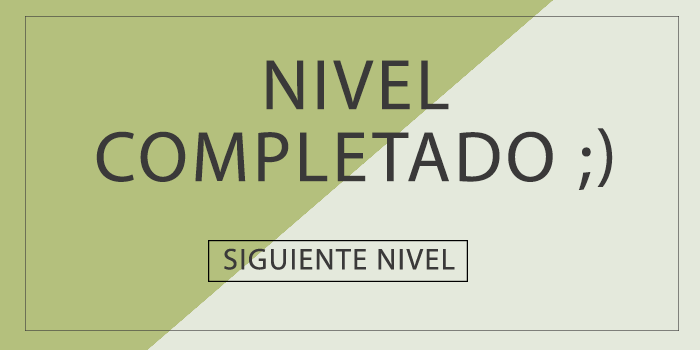
<style>
.page{position:relative;width:700px;height:350px;background:#b4c07d}
.page>*{position:absolute;margin:0}
.t1{font:72px/72px "MyriadPro-Regular";letter-spacing:0.05em;color:#3a3939;text-transform:uppercase}
</style>
<div class="page">
<p class="t1" style="left:96px;top:60px;width:517px;height:130px;text-align:center">Nivel completado ;)</p>
</div>
